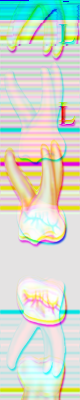
<style>
.page{position:relative;width:80px;height:400px}
.page>*{position:absolute;margin:0}
.t1{font:28.4px "TimesNewRomanPSMT";letter-spacing:0.005em}
</style>
<div class="page">
<p class="t1" style="left:58px;top:4px;width:17px;height:19px">L</p>
</div>
